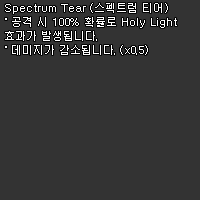
<style>
.page{position:relative;width:200px;height:200px;background:#333333}
.page>*{position:absolute;margin:0}
.t1{font:11px/14px "Dotum";color:#ffffff}
</style>
<div class="page">
<p class="t1" style="left:5px;top:3px;width:172px;height:52px">Spectrum Tear (스펙트럼 티어)<br>˚ 공격 시 100% 확률로 Holy Light<br>효과가 발생됩니다.<br>˚ 데미지가 감소됩니다. (x0.5)</p>
</div>
